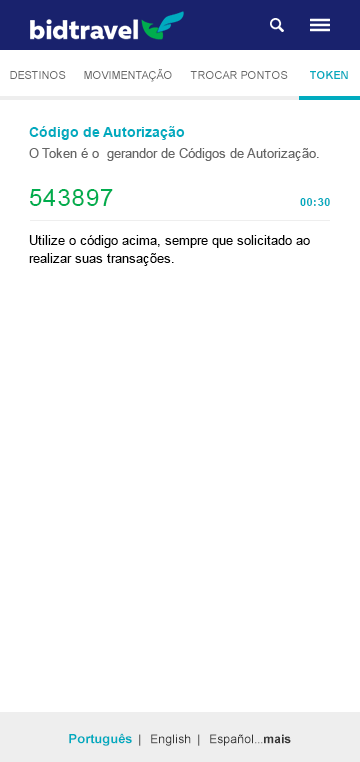
<style>
.page{position:relative;width:360px;height:762px;background:#ffffff}
.page>*{position:absolute;margin:0}
.t1{font:11px "ArialMT";color:#666666;text-transform:uppercase}
.t2{font:11px "Arial-BoldMT";color:#00abbf;text-transform:uppercase}
.t3{font:14px "Arial-BoldMT";color:#00abbf}
.t4{font:13px "ArialMT";color:#666666}
.t5{font:24px "ArialMT";letter-spacing:0.05em;color:#00ad4e}
.t6{font:11px "Arial-BoldMT";letter-spacing:0.05em;color:#00abbf}
.t7{font:13px/18px "ArialMT";color:#000000}
.t8{font:12px "ArialMT";color:#333333}
.t9{font:13px "Arial-BoldMT";color:#00abbf}
.t10{font:12px "Arial-BoldMT";color:#333333}
</style>
<div class="page">
<p class="t1" style="left:10px;top:71px;width:56px;height:8px">Destinos</p>
<p class="t1" style="left:84px;top:69px;width:88px;height:13px">Movimentação</p>
<p class="t1" style="left:190px;top:71px;width:98px;height:8px">Trocar Pontos</p>
<p class="t2" style="left:310px;top:71px;width:38px;height:8px">Token</p>
<p class="t3" style="left:29px;top:126px;width:156px;height:14px">Código de Autorização</p>
<p class="t4" style="left:29px;top:148px;width:290px;height:13px">O Token é o  gerandor de Códigos de Autorização.</p>
<p class="t5" style="left:30px;top:189px;width:83px;height:17px">543897</p>
<p class="t6" style="left:300px;top:198px;width:30px;height:8px">00:30</p>
<p class="t7" style="left:29px;top:235px;width:281px;height:31px">Utilize o código acima, sempre que solicitado ao<br>realizar suas transações.</p>
<p class="t8" style="left:69px;top:733px;width:222px;height:13px"><span class="t9">Português</span>  |   English  |   Español...<span class="t10">mais</span></p>
</div>
